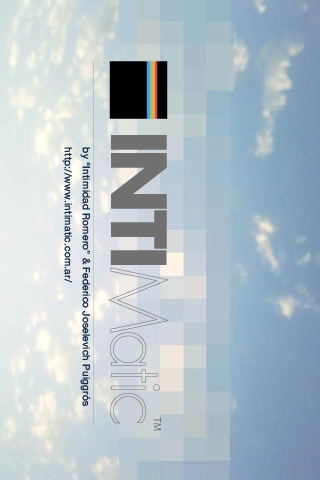
<style>
.page{position:relative;width:320px;height:480px}
.page>*{position:absolute;margin:0}
.t1{font:10px/18px "HelveticaNeue";letter-spacing:0.025em;color:#072342}
</style>
<div class="page">
<p class="t1" style="left:62px;top:147px;width:29px;height:260px;rotate:90deg">by “Intimidad Romero” &amp; Federico Joselevich Puiggrós<br>http://www.intimatic.com.ar/</p>
</div>
